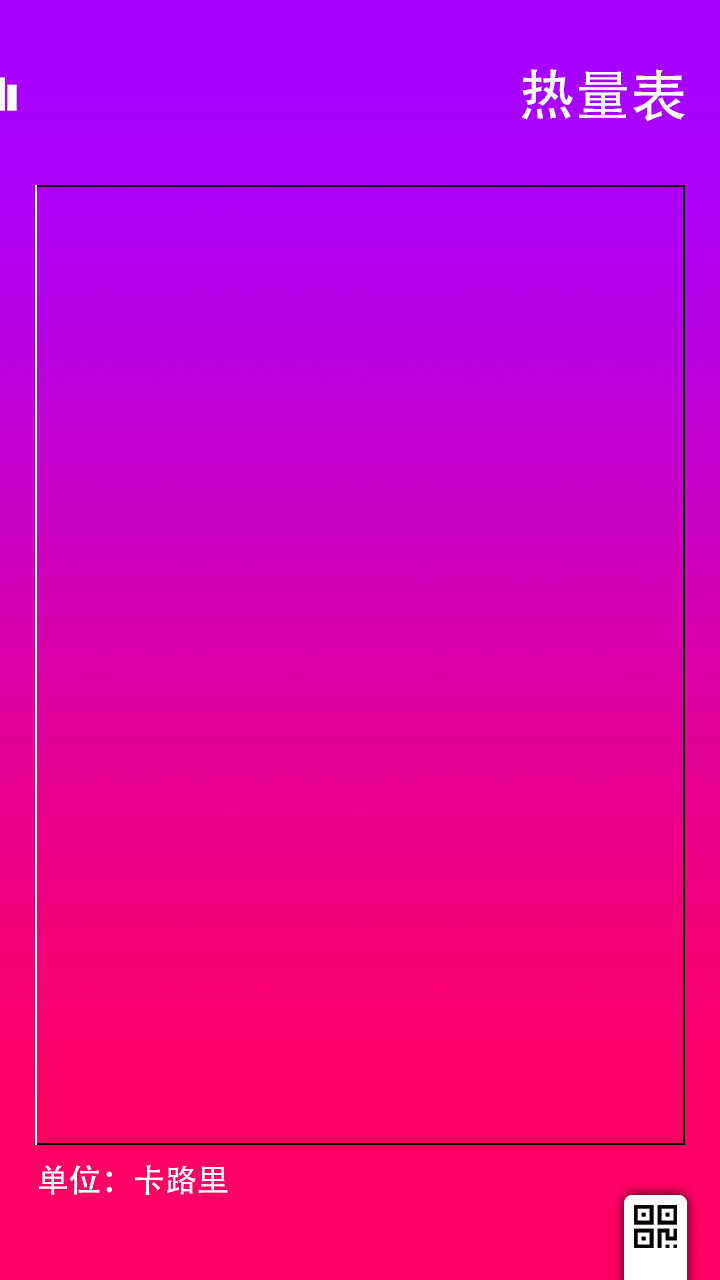
<style>
.page{position:relative;width:720px;height:1280px}
.page>*{position:absolute;margin:0}
.t1{font:56px "AdobeHeitiStd-Regular";color:#ffffff}
.t2{font:32px "AdobeHeitiStd-Regular";color:#ffffff}
</style>
<div class="page">
<p class="t1" style="left:522px;top:69px;width:163px;height:53px">热量表</p>
<p class="t2" style="left:39px;top:1165px;width:189px;height:30px">单位：卡路里</p>
</div>
